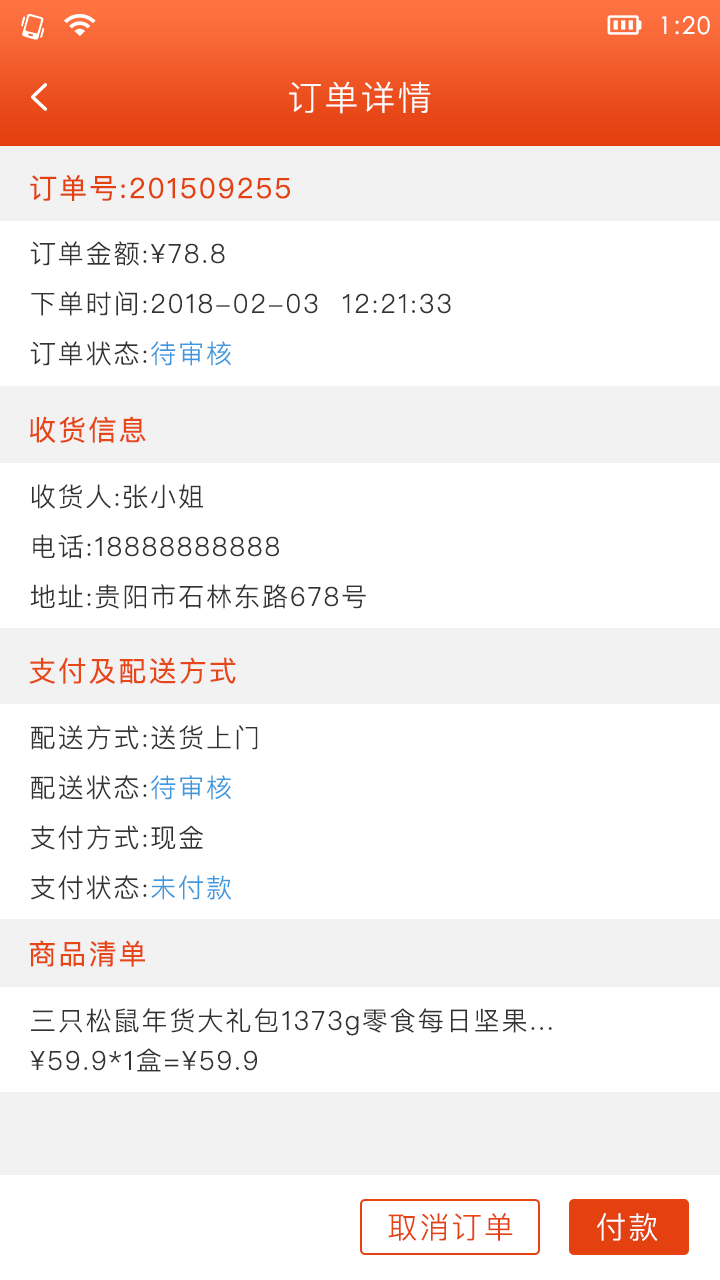
<style>
.page{position:relative;width:720px;height:1280px;background:#ffffff}
.page>*{position:absolute;margin:0}
.t1{font:24px "STXihei";letter-spacing:0.075em;color:#ffffff}
.t2{font:34px "PingFangSC-Light";letter-spacing:0.075em;color:#ffffff}
.t3{font:28px "PingFangSC-Regular";letter-spacing:0.075em;color:#e44111}
.t4{font:26px/50px "PingFangSC-Light";letter-spacing:0.075em;color:#333333}
.t5{font:26px/50px "PingFangSC-Light";letter-spacing:0.075em;color:#3d98df}
.t6{font:28px "PingFangSC-Regular";letter-spacing:0.075em;color:#e74616}
.t7{font:26px/40px "PingFangSC-Light";letter-spacing:0.075em;color:#333333}
.t8{font:26px/30px "PingFangSC-Light";letter-spacing:0.075em;color:#333333}
.t9{font:30px "PingFangSC-Light";letter-spacing:0.075em;color:#e54313}
.t10{font:30px "PingFangSC-Light";letter-spacing:0.075em;color:#ffffff}
</style>
<div class="page">
<p class="t1" style="left:661px;top:16px;width:49px;height:19px">1:20</p>
<p class="t2" style="left:289px;top:81px;width:142px;height:33px">订单详情</p>
<p class="t3" style="left:30px;top:175px;width:260px;height:26px">订单号:201509255</p>
<p class="t4" style="left:30px;top:241px;width:421px;height:125px">订单金额:¥78.8<br>下单时间:2018-02-03  12:21:33<br>订单状态:<span class="t5">待审核</span></p>
<p class="t6" style="left:30px;top:416px;width:116px;height:27px">收货信息</p>
<p class="t4" style="left:30px;top:484px;width:336px;height:125px">收货人:张小姐<br>电话:18888888888<br>地址:贵阳市石林东路678号</p>
<p class="t6" style="left:29px;top:657px;width:207px;height:27px">支付及配送方式</p>
<p class="t4" style="left:31px;top:725px;width:227px;height:175px">配送方式:送货上门<br>配送状态:<span class="t5">待审核<br></span>支付方式:现金<br>支付状态:<span class="t5">未付款</span></p>
<p class="t6" style="left:29px;top:940px;width:116px;height:27px">商品清单</p>
<p class="t7" style="left:30px;top:1008px;width:522px;height:64px">三只松鼠年货大礼包1373g零食每日坚果...<br><span class="t8">¥59.9*1盒=¥59.9</span></p>
<p class="t9" style="left:388px;top:1213px;width:125px;height:28px">取消订单</p>
<p class="t10" style="left:597px;top:1213px;width:61px;height:28px">付款</p>
</div>
